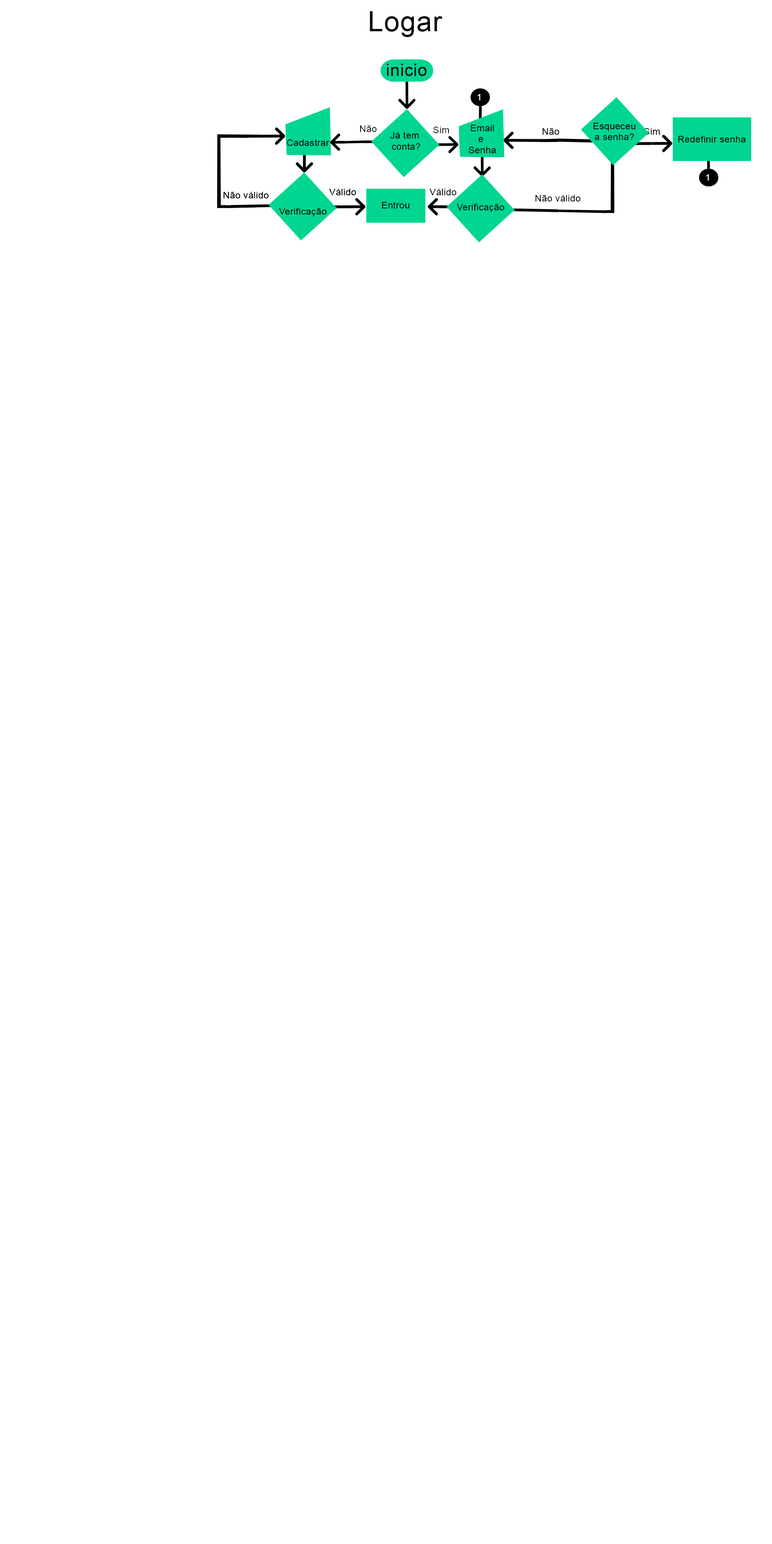
<style>
.page{position:relative;width:772px;height:1544px;background:#ffffff}
.page>*{position:absolute;margin:0}
.t1{font:27.8px "ArialMT";letter-spacing:0.025em;color:#000000}
.t2{font:9.3px "ArialMT";letter-spacing:0.025em;color:#ffffff}
.t3{font:9.3px "ArialMT";letter-spacing:0.025em;color:#000000}
</style>
<div class="page">
<p class="t1" style="left:370px;top:11px;width:72px;height:26px">Logar</p>
<p class="t2" style="left:478px;top:94px;width:3px;height:6px">1</p>
<p class="t3" style="left:593px;top:123px;width:42px;height:17px;text-align:center">Esqueceu<br>a senha?</p>
<p class="t3" style="left:542px;top:128px;width:17px;height:7px">Não</p>
<p class="t3" style="left:644px;top:128px;width:16px;height:7px">Sim</p>
<p class="t3" style="left:678px;top:136px;width:68px;height:6px">Redefinir senha</p>
<p class="t3" style="left:287px;top:139px;width:42px;height:7px">Cadastrar</p>
<p class="t2" style="left:706px;top:174px;width:3px;height:7px">1</p>
<p class="t3" style="left:430px;top:189px;width:27px;height:6px">Válido</p>
<p class="t3" style="left:535px;top:195px;width:46px;height:7px">Não válido</p>
<p class="t3" style="left:279px;top:208px;width:48px;height:8px">Verificação</p>
<p class="t3" style="left:382px;top:202px;width:28px;height:6px">Entrou</p>
<p class="t3" style="left:457px;top:204px;width:48px;height:8px">Verificação</p>
</div>
